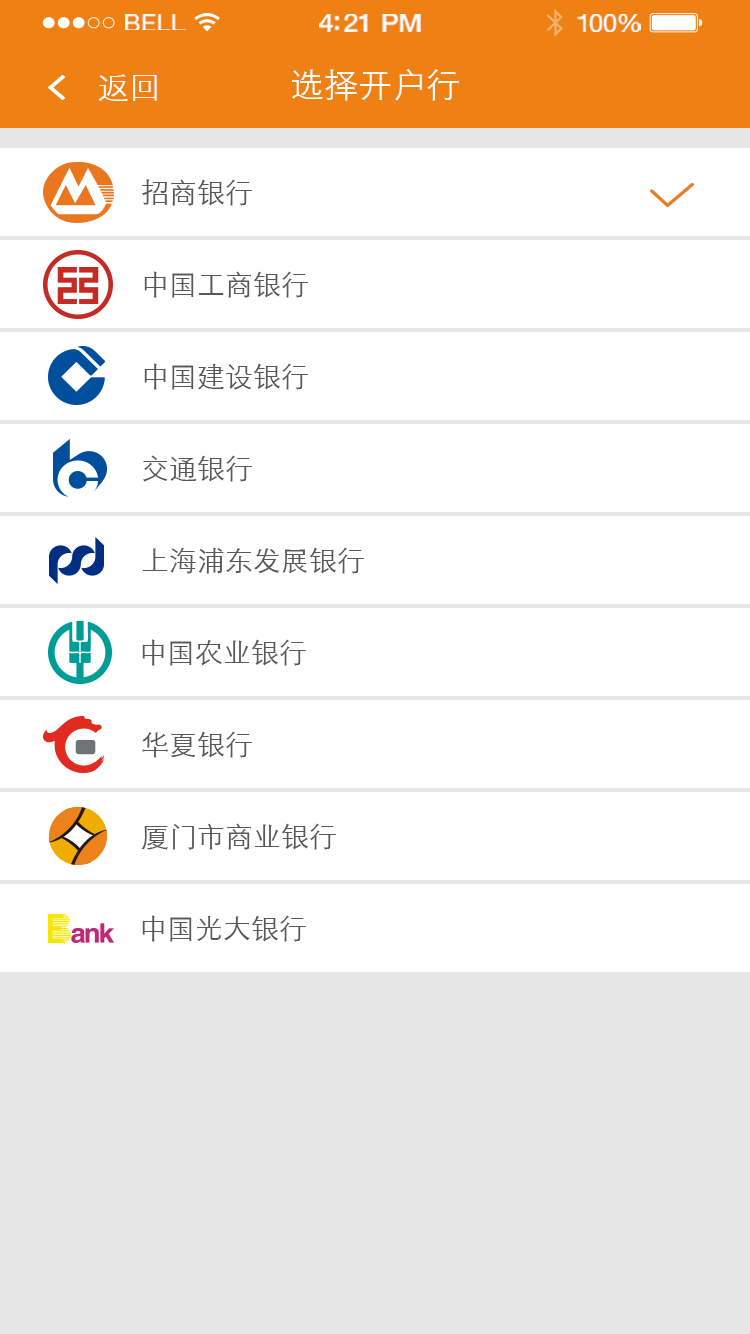
<style>
.page{position:relative;width:750px;height:1334px;background:#ffffff}
.page>*{position:absolute;margin:0}
.t1{font:23.3px "HelveticaNeue";letter-spacing:0.02em;color:#ffffff;scale:1.06 1}
.t2{font:25.3px "HelveticaNeue-Medium";letter-spacing:-0.02em;color:#ffffff;scale:1.06 1}
.t3{font:24.3px "HelveticaNeue";letter-spacing:-0.02em;color:#ffffff;scale:1.06 1}
.t4{font:32px "STXihei";color:#ffffff}
.t5{font:34px "STXihei";color:#ffffff}
.t6{font:28px "STXihei";color:#595757}
</style>
<div class="page">
<p class="t1" style="left:125px;top:14px;width:61px;height:16px">BELL</p>
<p class="t2" style="left:319px;top:14px;width:102px;height:18px">4:21 PM</p>
<p class="t3" style="left:577px;top:14px;width:64px;height:18px">100%</p>
<p class="t4" style="left:98px;top:74px;width:59px;height:27px">返回</p>
<p class="t5" style="left:291px;top:68px;width:168px;height:33px">选择开户行</p>
<p class="t6" style="left:142px;top:179px;width:110px;height:27px">招商银行</p>
<p class="t6" style="left:144px;top:271px;width:164px;height:27px">中国工商银行</p>
<p class="t6" style="left:144px;top:363px;width:164px;height:27px">中国建设银行</p>
<p class="t6" style="left:143px;top:455px;width:109px;height:27px">交通银行</p>
<p class="t6" style="left:142px;top:547px;width:222px;height:27px">上海浦东发展银行</p>
<p class="t6" style="left:142px;top:639px;width:164px;height:27px">中国农业银行</p>
<p class="t6" style="left:142px;top:731px;width:110px;height:27px">华夏银行</p>
<p class="t6" style="left:141px;top:823px;width:195px;height:27px">厦门市商业银行</p>
<p class="t6" style="left:142px;top:915px;width:164px;height:27px">中国光大银行</p>
</div>
